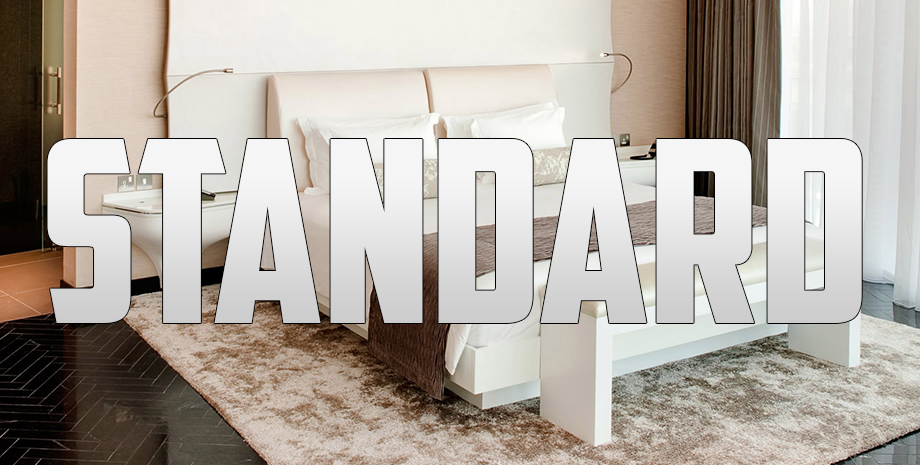
<style>
.page{position:relative;width:920px;height:465px}
.page>*{position:absolute;margin:0}
.t1{font:254.4px "AmericanCaptain";color:#f5f5f5}
</style>
<div class="page">
<p class="t1" style="left:47px;top:139px;width:815px;height:184px">STANDARD</p>
</div>
